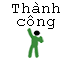
<style>
.page{position:relative;width:71px;height:58px;background:#ffffff}
.page>*{position:absolute;margin:0}
.t1{font:12px/13.3px "CourierNewPSMT";color:#000000}
</style>
<div class="page">
<p class="t1" style="left:12px;top:2px;width:48px;height:27px;text-align:center">Thành<br>công</p>
</div>
